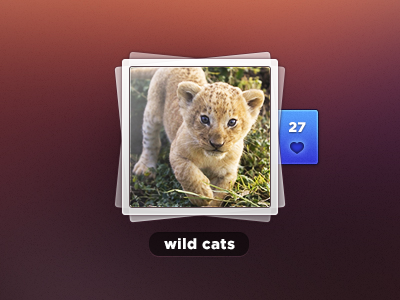
<style>
.page{position:relative;width:400px;height:300px}
.page>*{position:absolute;margin:0}
.t1{font:14px "GothamBlack";letter-spacing:0.01em;color:#ffffff}
.t2{font:15px "GothamBlack";letter-spacing:0.025em;color:#ffffff}
</style>
<div class="page">
<p class="t1" style="left:289px;top:122px;width:17px;height:10px">27</p>
<p class="t2" style="left:164px;top:238px;width:71px;height:12px">wild cats</p>
</div>
